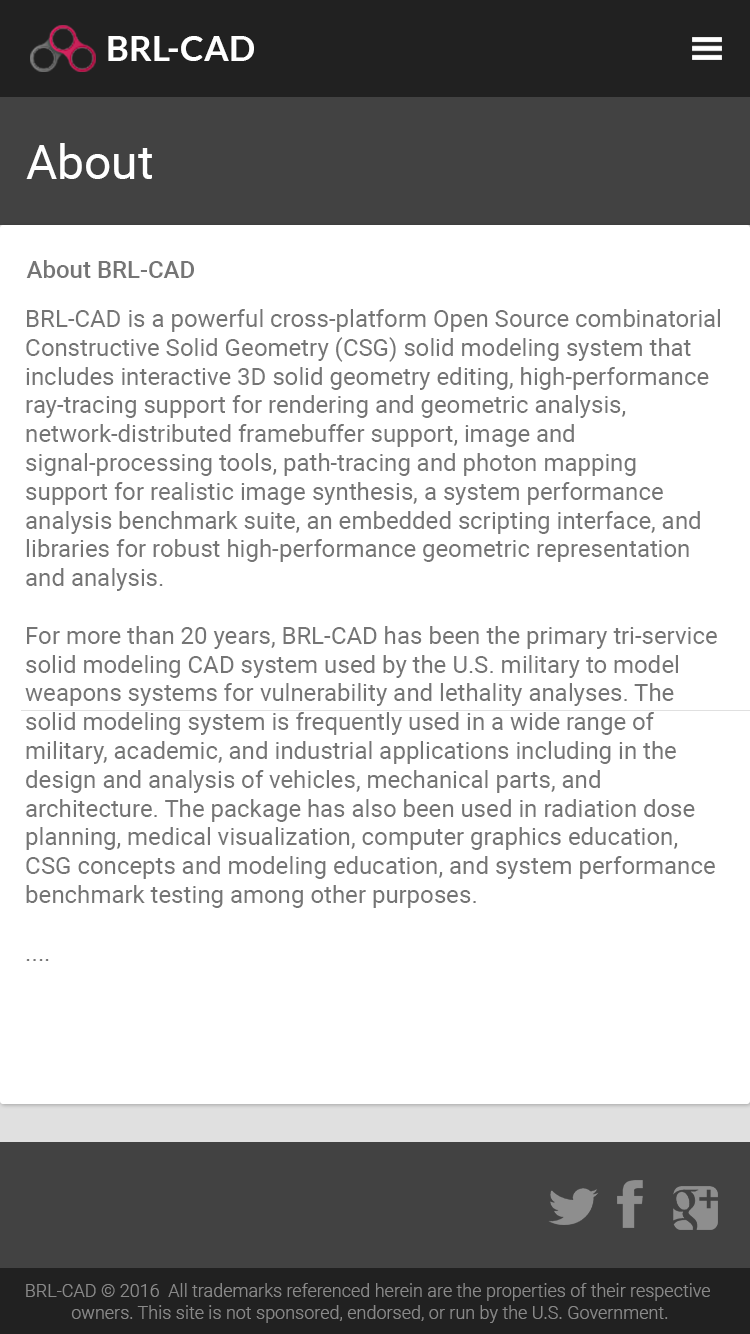
<style>
.page{position:relative;width:750px;height:1334px;background:#ffffff}
.page>*{position:absolute;margin:0}
.t1{font:35.1px "Lato-Bold";color:#ffffff}
.t2{font:48px "Roboto-Regular";color:#ffffff}
.t3{font:24px "Roboto-Medium";color:#757575}
.t4{font:24px "Roboto-Regular";color:#757575}
.t5{font:18px "Roboto-Light";color:#898989}
</style>
<div class="page">
<p class="t1" style="left:108px;top:36px;width:146px;height:25px">BRL-CAD</p>
<p class="t2" style="left:26px;top:143px;width:126px;height:36px">About</p>
<p class="t3" style="left:26px;top:260px;width:168px;height:18px">About BRL-CAD</p>
<p class="t4" style="left:25px;top:309px;width:695px;height:652px">BRL-CAD is a powerful cross-platform Open Source combinatorial Constructive Solid Geometry (CSG) solid modeling system that includes interactive 3D solid geometry editing, high-performance ray-tracing support for rendering and geometric analysis, network-distributed framebuffer support, image and signal-processing tools, path-tracing and photon mapping support for realistic image synthesis, a system performance analysis benchmark suite, an embedded scripting interface, and libraries for robust high-performance geometric representation and analysis.<br><br>For more than 20 years, BRL-CAD has been the primary tri-service solid modeling CAD system used by the U.S. military to model weapons systems for vulnerability and lethality analyses. The solid modeling system is frequently used in a wide range of military, academic, and industrial applications including in the design and analysis of vehicles, mechanical parts, and architecture. The package has also been used in radiation dose planning, medical visualization, computer graphics education, CSG concepts and modeling education, and system performance benchmark testing among other purposes.<br><br>....</p>
<p class="t5" style="left:26px;top:1283px;width:684px;height:40px;text-align:center">BRL-CAD © 2016  All trademarks referenced herein are the properties of their respective<br> owners. This site is not sponsored, endorsed, or run by the U.S. Government.</p>
</div>
